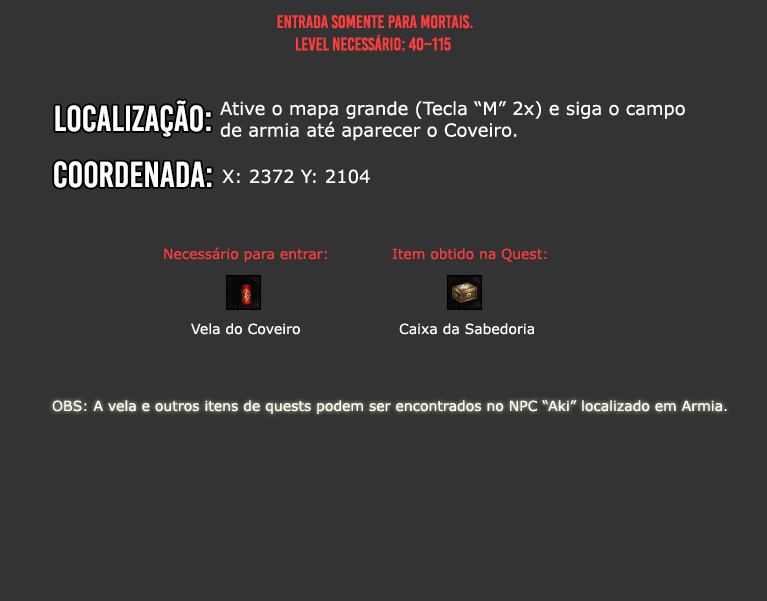
<style>
.page{position:relative;width:767px;height:601px;background:#333333}
.page>*{position:absolute;margin:0}
.t1{font:18px "BebasKai";color:#ff3b3b}
.t2{font:36px "BebasKai";color:#fefefe}
.t3{font:18px "Verdana";color:#fefefe}
.t4{font:14px "Verdana";color:#ff3b3b}
.t5{font:14px "Verdana";color:#fefefe}
</style>
<div class="page">
<p class="t1" style="left:277px;top:15px;width:196px;height:14px">Entrada somente para mortais.</p>
<p class="t1" style="left:296px;top:34px;width:155px;height:17px">level necessário: 40~115</p>
<p class="t2" style="left:55px;top:100px;width:156px;height:37px">localização:</p>
<p class="t3" style="left:220px;top:101px;width:465px;height:40px">Ative o mapa grande (Tecla “M” 2x) e siga o campo<br>de armia até aparecer o Coveiro.</p>
<p class="t2" style="left:54px;top:161px;width:158px;height:27px">Coordenada:</p>
<p class="t3" style="left:222px;top:169px;width:148px;height:15px">X: 2372 Y: 2104</p>
<p class="t4" style="left:164px;top:247px;width:163px;height:15px">Necessário para entrar:</p>
<p class="t4" style="left:392px;top:248px;width:155px;height:14px">Item obtido na Quest:</p>
<p class="t5" style="left:191px;top:323px;width:109px;height:12px">Vela do Coveiro</p>
<p class="t5" style="left:399px;top:323px;width:135px;height:12px">Caixa da Sabedoria</p>
<p class="t5" style="left:52px;top:400px;width:675px;height:14px">OBS: A vela e outros itens de quests podem ser encontrados no NPC “Aki” localizado em Armia.</p>
</div>
